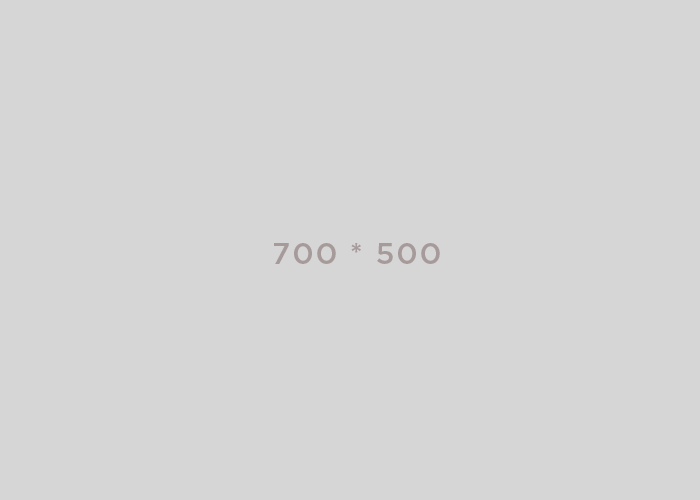
<style>
.page{position:relative;width:700px;height:500px;background:#d6d6d6}
.page>*{position:absolute;margin:0}
.t1{font:30px "Gotham-Medium";letter-spacing:0.06em;color:#a69a9a}
</style>
<div class="page">
<p class="t1" style="left:274px;top:243px;width:166px;height:21px">700 * 500</p>
</div>
